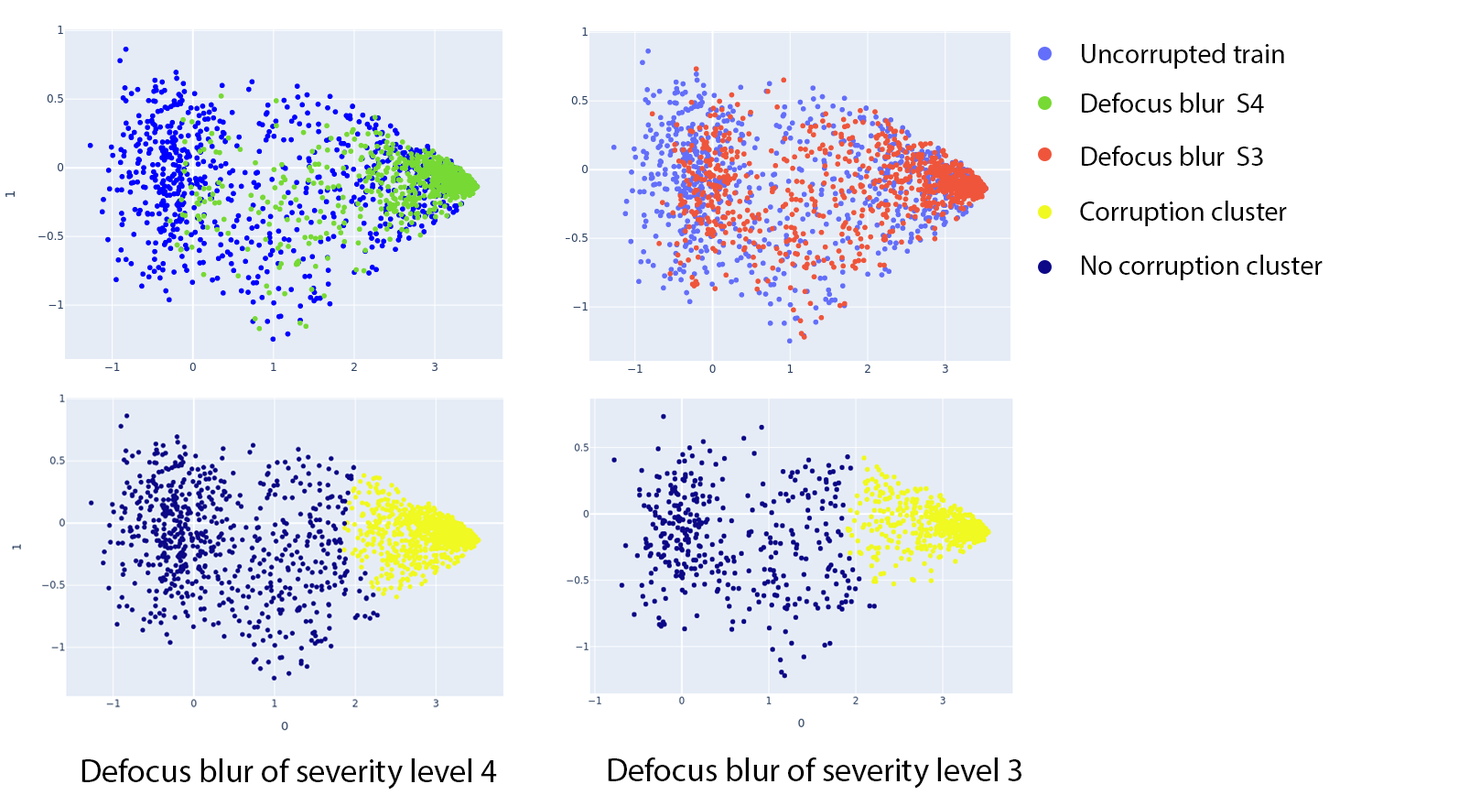
<style>
.page{position:relative;width:1480px;height:806px;background:#ffffff}
.page>*{position:absolute;margin:0}
.t1{font:27.5px "MyriadPro-Regular";color:#000000}
.t2{font:33px "MyriadPro-Regular";color:#000000}
</style>
<div class="page">
<p class="t1" style="left:1082px;top:43px;width:202px;height:26px">Uncorrupted train</p>
<p class="t1" style="left:1082px;top:92px;width:182px;height:21px">Defocus blur  S4</p>
<p class="t1" style="left:1082px;top:146px;width:181px;height:20px">Defocus blur  S3</p>
<p class="t1" style="left:1080px;top:200px;width:207px;height:26px">Corruption cluster</p>
<p class="t1" style="left:1082px;top:254px;width:241px;height:26px">No corruption cluster</p>
<p class="t2" style="left:81px;top:758px;width:416px;height:31px">Defocus blur of severity level 4</p>
<p class="t2" style="left:608px;top:757px;width:414px;height:31px">Defocus blur of severity level 3</p>
</div>
